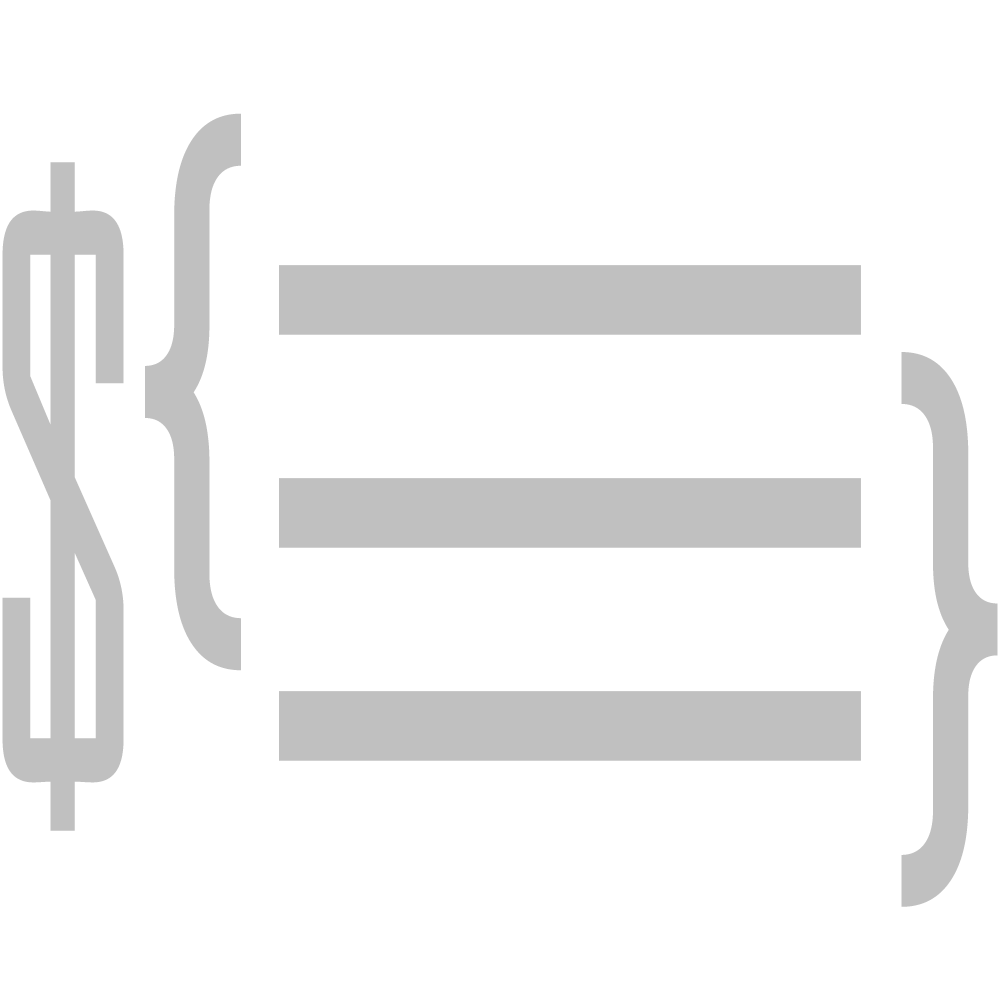
<style>
.page{position:relative;width:1000px;height:1000px;background:#ffffff}
.page>*{position:absolute;margin:0}
.t1{font:547.2px "Bahnschrift";color:#c0c0c0;scale:0.64 1}
.t2{font:755.7px "AgencyFB-Reg";color:#c0c0c0;scale:0.54 1}
.t3{font:545.5px "Bahnschrift";color:#c0c0c0;scale:0.64 1}
</style>
<div class="page">
<p class="t1" style="left:145px;top:113px;width:96px;height:558px">{</p>
<p class="t2" style="left:2px;top:162px;width:122px;height:669px">$</p>
<p class="t3" style="left:901px;top:352px;width:97px;height:555px">}</p>
</div>
